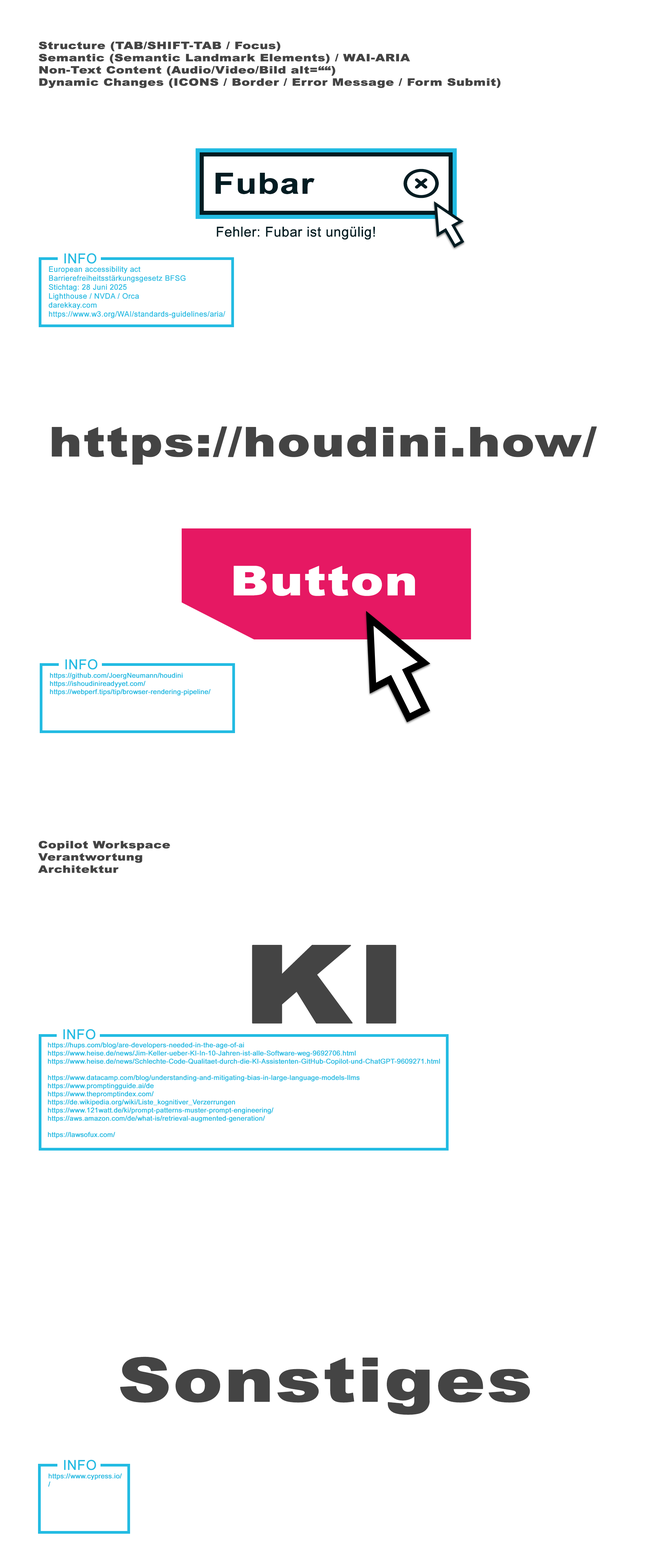
<style>
.page{position:relative;width:652px;height:1568px;background:#ffffff}
.page>*{position:absolute;margin:0}
.t1{font:10.2px "Arial-Black";color:#444444;font-weight:bold;scale:1.21 1}
.t2{font:28.8px "Arial-BoldMT";color:#021c22;font-weight:bold;scale:1.21 1}
.t3{font:13.6px "ArialNarrow";color:#021c22;font-weight:bold;scale:1.21 1}
.t4{font:13.6px "ArialNarrow";color:#23bbe2;font-weight:bold;scale:1.21 1}
.t5{font:7.5px "ArialNarrow";color:#23bbe2;font-weight:bold;scale:1.21 1}
.t6{font:40.7px "Arial-Black";color:#444444;font-weight:bold;scale:1.21 1}
.t7{font:40.7px "Arial-Black";color:#ffffff;font-weight:bold;scale:1.21 1}
.t8{font:6.8px "ArialNarrow";color:#23bbe2;font-weight:bold;scale:1.21 1}
.t9{font:108.6px "Arial-Black";color:#444444;font-weight:bold;scale:1.21 1}
.t10{font:61.1px "Arial-Black";color:#444444;font-weight:bold;scale:1.21 1}
</style>
<div class="page">
<p class="t1" style="left:39px;top:41px;width:461px;height:47px">Structure (TAB/SHIFT-TAB / Focus)<br>Semantic (Semantic Landmark Elements) / WAI-ARIA<br>Non-Text Content (Audio/Video/Bild alt=““)<br>Dynamic Changes (ICONS / Border / Error Message / Form Submit)</p>
<p class="t2" style="left:215px;top:173px;width:100px;height:21px">Fubar</p>
<p class="t3" style="left:217px;top:227px;width:158px;height:13px">Fehler: Fubar ist ungülig!</p>
<p class="t4" style="left:64px;top:253px;width:32px;height:11px">INFO</p>
<p class="t5" style="left:49px;top:266px;width:176px;height:52px">European accessibility act<br>Barrierefreiheitsstärkungsgesetz BFSG<br>Stichtag: 28 Juni 2025<br>Lighthouse / NVDA / Orca<br>darekkay.com<br>https://www.w3.org/WAI/standards-guidelines/aria/</p>
<p class="t6" style="left:52px;top:426px;width:545px;height:39px">https://houdini.how/</p>
<p class="t7" style="left:234px;top:566px;width:181px;height:30px">Button</p>
<p class="t4" style="left:65px;top:659px;width:32px;height:11px">INFO</p>
<p class="t8" style="left:50px;top:673px;width:160px;height:23px">https://github.com/JoergNeumann/houdini<br>https://ishoudinireadyyet.com/<br>https://webperf.tips/tip/browser-rendering-pipeline/</p>
<p class="t1" style="left:38px;top:841px;width:132px;height:32px">Copilot Workspace<br>Verantwortung<br>Architektur</p>
<p class="t9" style="left:252px;top:945px;width:144px;height:79px">KI</p>
<p class="t4" style="left:63px;top:1029px;width:32px;height:11px">INFO</p>
<p class="t8" style="left:48px;top:1042px;width:392px;height:96px">https://hups.com/blog/are-developers-needed-in-the-age-of-ai<br>https://www.heise.de/news/Jim-Keller-ueber-KI-In-10-Jahren-ist-alle-Software-weg-9692706.html<br>https://www.heise.de/news/Schlechte-Code-Qualitaet-durch-die-KI-Assistenten-GitHub-Copilot-und-ChatGPT-9609271.html<br><br>https://www.datacamp.com/blog/understanding-and-mitigating-bias-in-large-language-models-llms<br>https://www.promptingguide.ai/de<br>https://www.thepromptindex.com/<br>https://de.wikipedia.org/wiki/Liste_kognitiver_Verzerrungen<br>https://www.121watt.de/ki/prompt-patterns-muster-prompt-engineering/<br>https://aws.amazon.com/de/what-is/retrieval-augmented-generation/<br><br>https://lawsofux.com/</p>
<p class="t10" style="left:120px;top:1357px;width:410px;height:58px">Sonstiges</p>
<p class="t4" style="left:64px;top:1460px;width:32px;height:10px">INFO</p>
<p class="t8" style="left:48px;top:1473px;width:74px;height:14px">https://www.cypress.io/<br>/</p>
</div>
